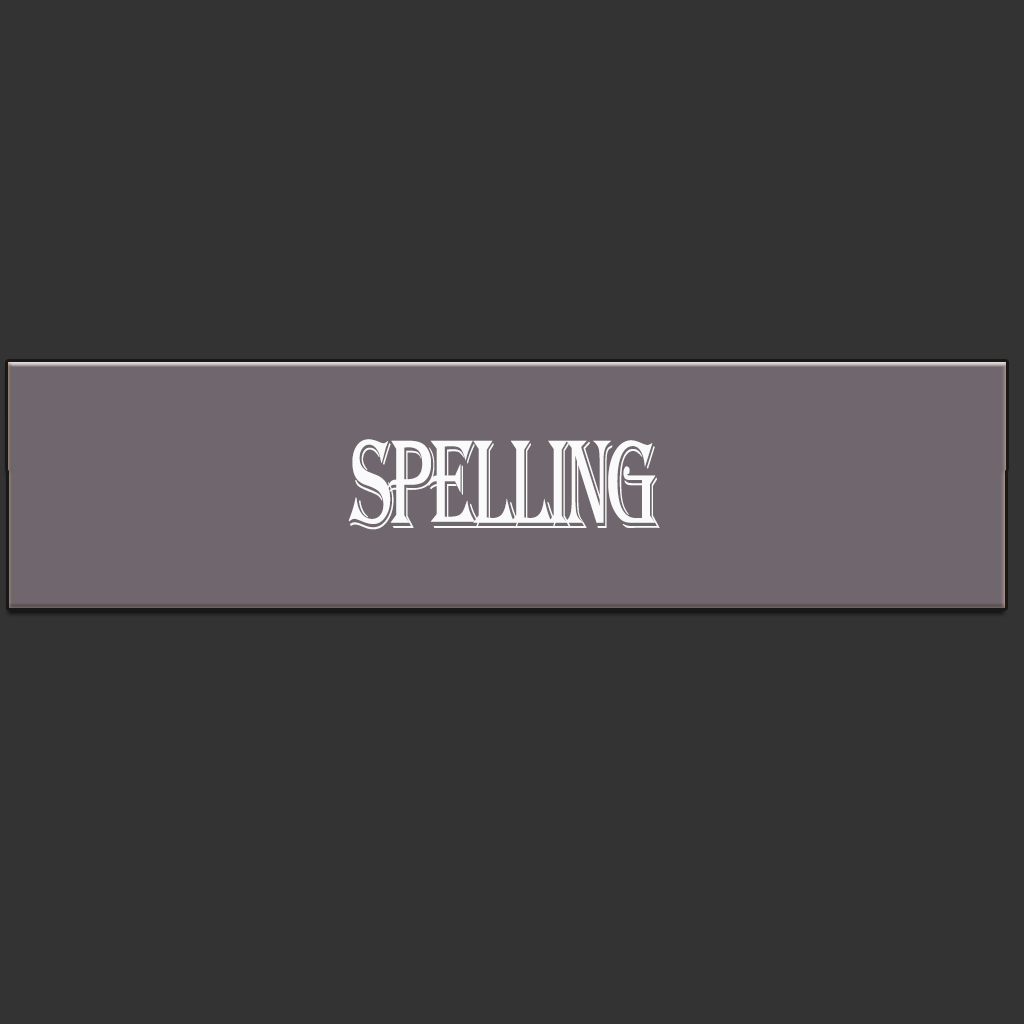
<style>
.page{position:relative;width:1024px;height:1024px;background:#333333}
.page>*{position:absolute;margin:0}
.t1{font:130.4px "Algerian";letter-spacing:-0.08em;color:#fafafa;scale:0.61 1}
</style>
<div class="page">
<p class="t1" style="left:348px;top:439px;width:312px;height:91px">Spelling</p>
</div>
